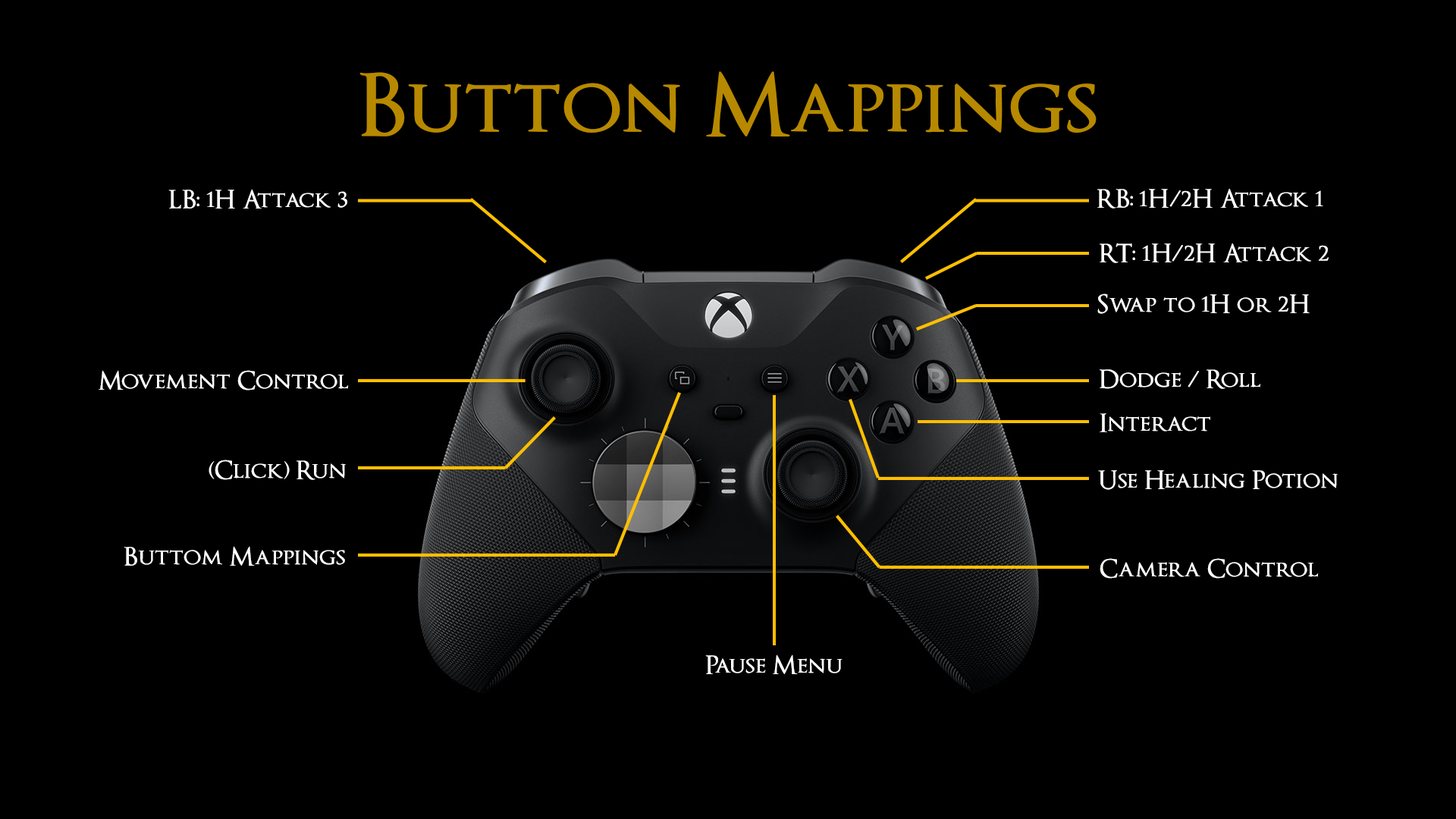
<style>
.page{position:relative;width:1456px;height:819px;background:#000000}
.page>*{position:absolute;margin:0}
.t1{font:85.3px "OptimusPrincepsSemiBold";color:#b78900}
.t2{font:25.3px "OptimusPrincepsSemiBold";color:#ffffff}
</style>
<div class="page">
<p class="t1" style="left:359px;top:71px;width:738px;height:66px">Button Mappings</p>
<p class="t2" style="left:168px;top:189px;width:179px;height:20px">LB: 1H Attack 3</p>
<p class="t2" style="left:1097px;top:188px;width:226px;height:21px">RB: 1H/2H Attack 1</p>
<p class="t2" style="left:1100px;top:243px;width:229px;height:20px">RT: 1H/2H Attack 2</p>
<p class="t2" style="left:1097px;top:293px;width:213px;height:21px">Swap to 1H or 2H</p>
<p class="t2" style="left:99px;top:370px;width:250px;height:21px">Movement Control</p>
<p class="t2" style="left:1100px;top:369px;width:161px;height:20px">Dodge / Roll</p>
<p class="t2" style="left:1100px;top:413px;width:110px;height:19px">Interact</p>
<p class="t2" style="left:209px;top:460px;width:137px;height:20px">(Click) Run</p>
<p class="t2" style="left:1098px;top:470px;width:240px;height:20px">Use Healing Potion</p>
<p class="t2" style="left:124px;top:546px;width:221px;height:20px">Buttom Mappings</p>
<p class="t2" style="left:1100px;top:558px;width:219px;height:21px">Camera Control</p>
<p class="t2" style="left:705px;top:654px;width:137px;height:20px">Pause Menu</p>
</div>
